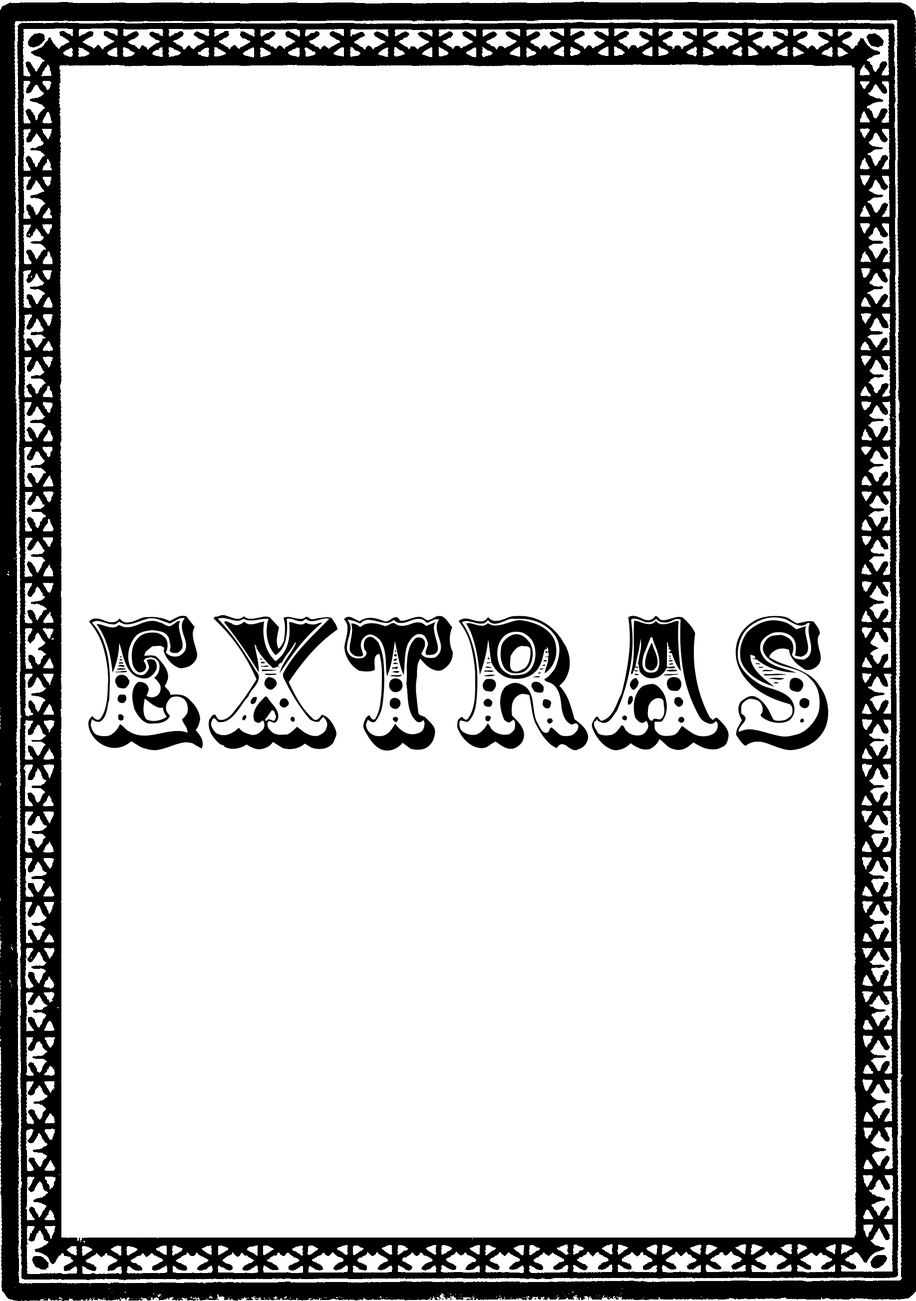
<style>
.page{position:relative;width:916px;height:1301px;background:#ffffff}
.page>*{position:absolute;margin:0}
.t1{font:168px "Circus";color:#000000}
</style>
<div class="page">
<p class="t1" style="left:88px;top:615px;width:741px;height:136px">EXTRAS</p>
</div>
